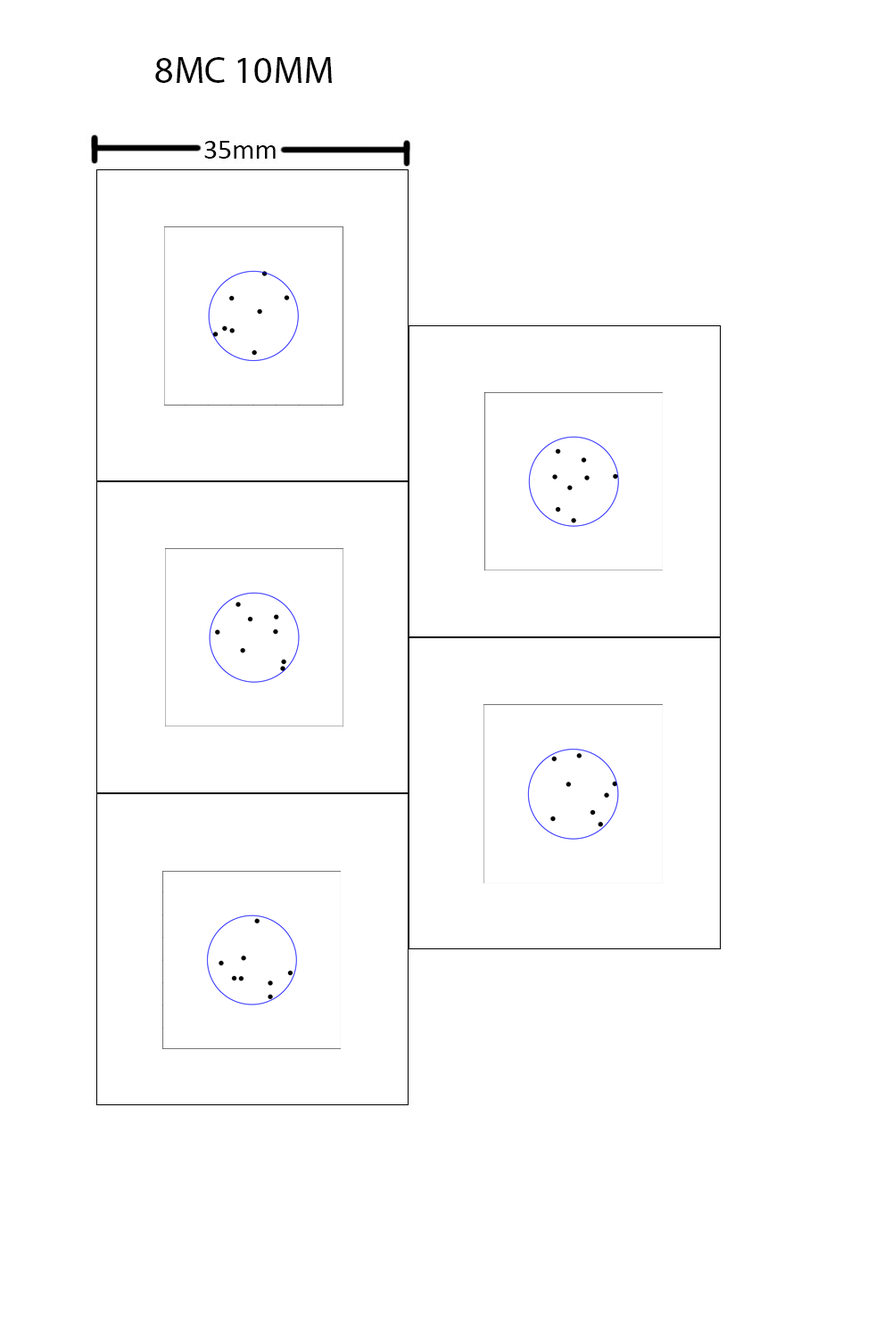
<style>
.page{position:relative;width:892px;height:1337px;background:#ffffff}
.page>*{position:absolute;margin:0}
.t1{font:37.7px "MyriadPro-Regular";color:#000000}
</style>
<div class="page">
<p class="t1" style="left:155px;top:57px;width:177px;height:26px">8MC 10MM</p>
</div>
